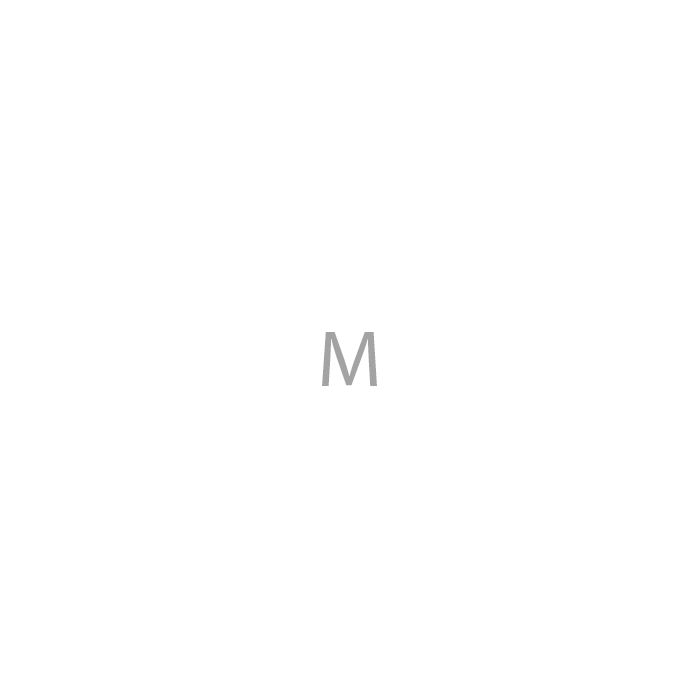
<style>
.page{position:relative;width:700px;height:700px;background:#ffffff}
.page>*{position:absolute;margin:0}
.t1{font:80px "MyriadPro-Regular";color:#a3a3a3}
</style>
<div class="page">
<p class="t1" style="left:322px;top:332px;width:55px;height:54px">M</p>
</div>
